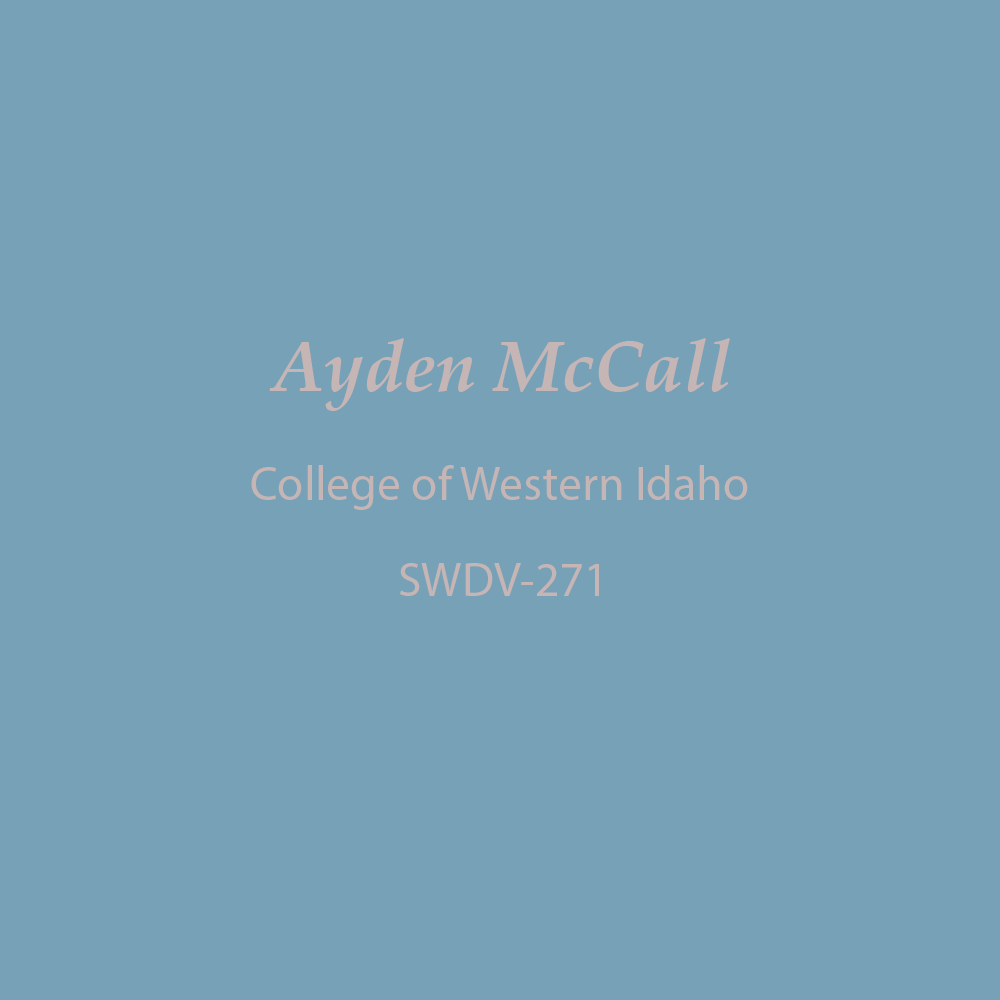
<style>
.page{position:relative;width:1000px;height:1000px;background:#76a1b7}
.page>*{position:absolute;margin:0}
.t1{font:72px "PalatinoLinotype-BoldItalic";color:#c5b5b5}
.t2{font:48px "MyriadPro-Regular";color:#c5b5b5}
</style>
<div class="page">
<p class="t1" style="left:269px;top:338px;width:461px;height:73px">Ayden McCall</p>
<p class="t2" style="left:251px;top:465px;width:497px;height:45px">College of Western Idaho</p>
<p class="t2" style="left:400px;top:563px;width:199px;height:33px">SWDV-271</p>
</div>
